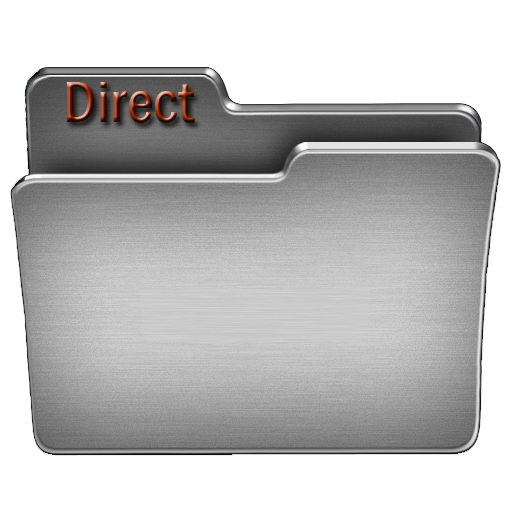
<style>
.page{position:relative;width:512px;height:512px;background:#ffffff}
.page>*{position:absolute;margin:0}
.t1{font:60px "FranklinGothic-MediumCond"}
</style>
<div class="page">
<p class="t1" style="left:66px;top:82px;width:129px;height:41px">Direct</p>
</div>
